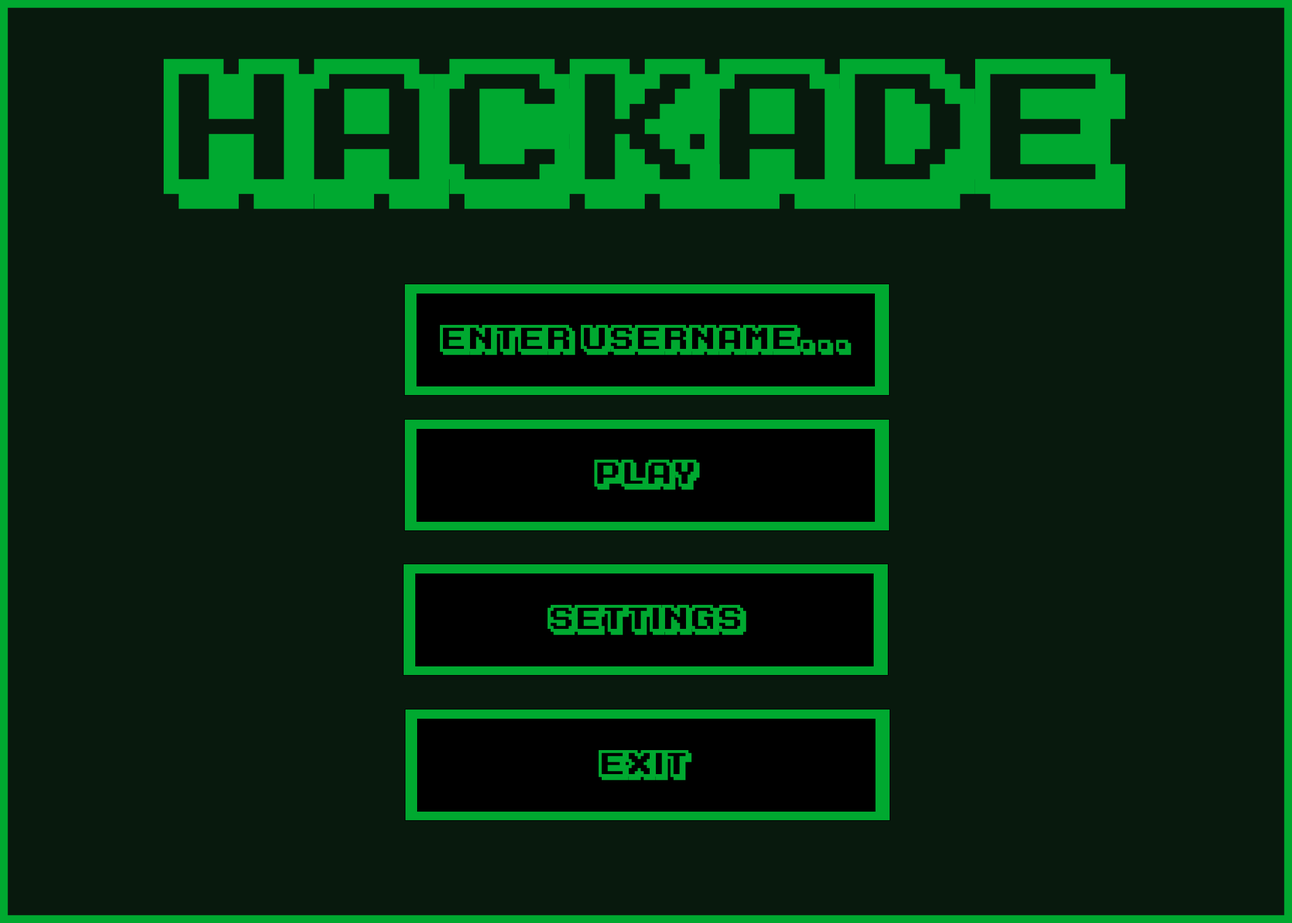
<style>
.page{position:relative;width:1292px;height:923px;background:#08190d}
.page>*{position:absolute;margin:0}
.t1{font:153.8px "KarmaticArcade";color:#00a930}
.t2{font:30.8px "KarmaticArcade";color:#00a930}
</style>
<div class="page">
<p class="t1" style="left:164px;top:58px;width:961px;height:151px">HACKade</p>
<p class="t2" style="left:440px;top:325px;width:412px;height:30px">Enter Username...</p>
<p class="t2" style="left:594px;top:460px;width:106px;height:30px">PLAY</p>
<p class="t2" style="left:548px;top:605px;width:198px;height:30px">SETTINGS</p>
<p class="t2" style="left:599px;top:750px;width:93px;height:30px">exit</p>
</div>
